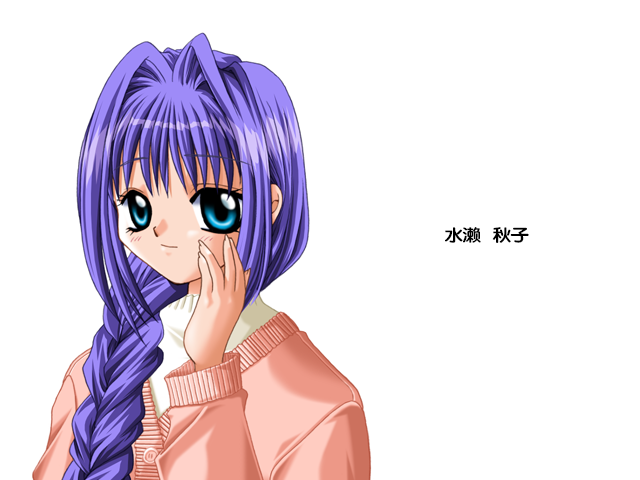
<style>
.page{position:relative;width:640px;height:480px;background:#ffffff}
.page>*{position:absolute;margin:0}
.t1{font:17px "FZY4K--GBK1-0";letter-spacing:-0.08em;color:#000000;scale:1.14 1}
</style>
<div class="page">
<p class="t1" style="left:445px;top:227px;width:84px;height:16px">水濑   秋子</p>
</div>
